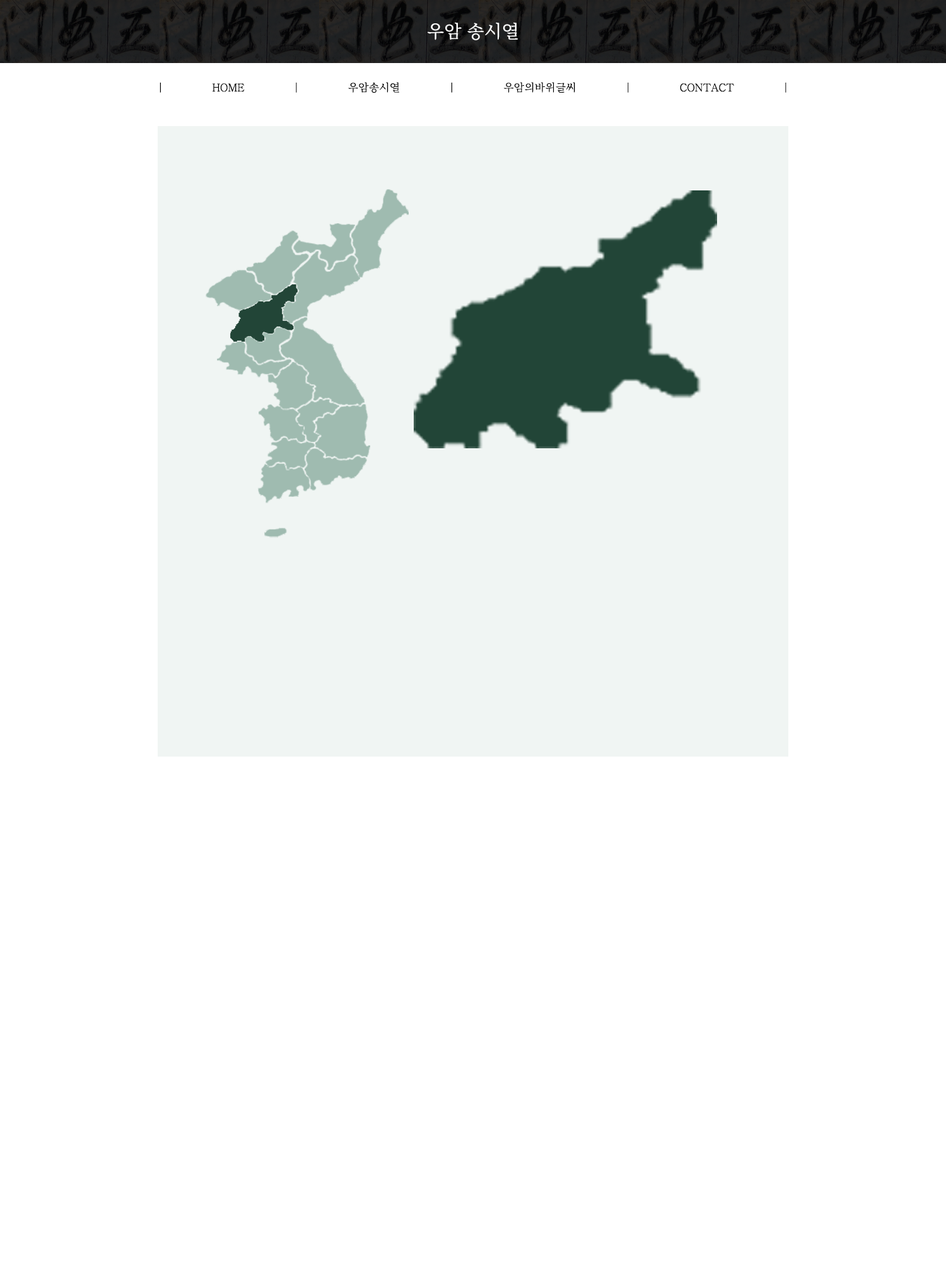
<style>
.page{position:relative;width:946px;height:1261px;background:#ffffff}
.page>*{position:absolute;margin:0}
.t1{font:18.9px "JejuMyeongjo";color:#ffffff}
.t2{font:11.3px "JejuMyeongjo";color:#000000}
</style>
<div class="page">
<p class="t1" style="left:427px;top:22px;width:91px;height:18px">우암 송시열</p>
<p class="t2" style="left:160px;top:82px;width:626px;height:11px">| HOME | 우암송시열 | 우암의바위글씨 | CONTACT |</p>
</div>
